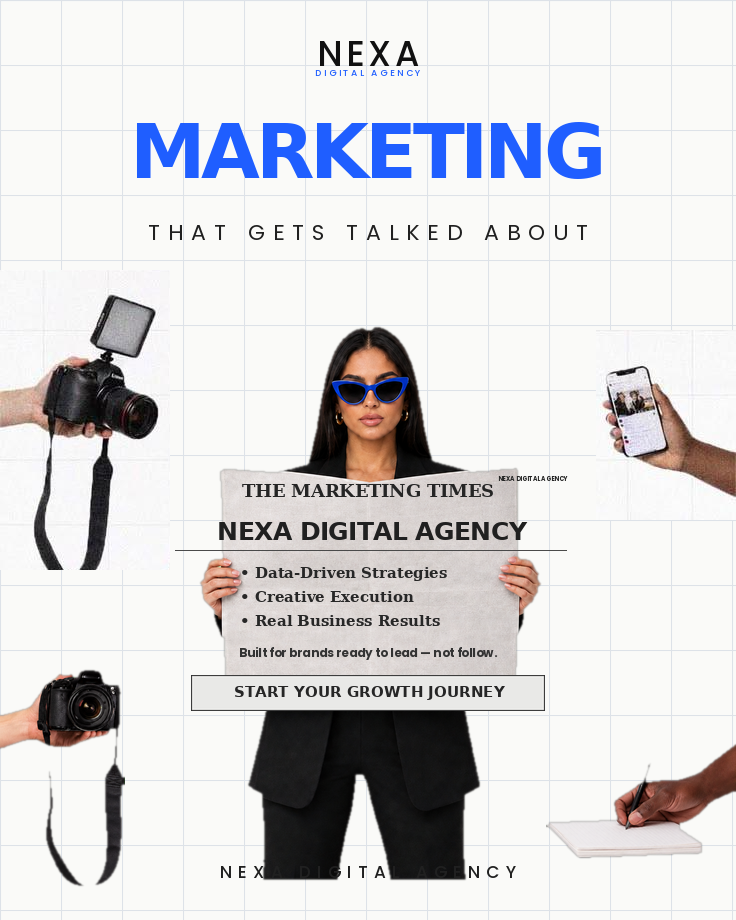
<style>
.page{position:relative;width:736px;height:920px;background:#fafaf8}
.page>*{position:absolute;margin:0}
.t1{font:35px "Poppins-Medium";letter-spacing:0.11em;color:#111111}
.t2{font:9px "Poppins-Medium";letter-spacing:0.28em;color:#1f5eff}
.t3{font:76px "DejaVuSans-Bold";letter-spacing:-0.055em;color:#1f5eff}
.t4{font:22px "Poppins-Regular";letter-spacing:0.36em;color:#202020}
.t5{font:18px "DejaVuSerif-Bold";letter-spacing:-0.015em;color:#252525}
.t6{font:6px "Poppins-Bold";letter-spacing:0.02em;color:#252525}
.t7{font:25px "DejaVuSans-Bold";letter-spacing:-0.025em;color:#202020}
.t8{font:15px "DejaVuSerif-Bold";color:#272727}
.t9{font:12px "Poppins-Bold";color:#333333}
.t10{font:15px "DejaVuSans-Bold";letter-spacing:0.005em;color:#262626}
.t11{font:17px "Poppins-Medium";letter-spacing:0.36em;color:#202020}
</style>
<div class="page">
<p class="t1" style="left:320px;top:41px;width:99px;height:25px">NEXA</p>
<p class="t2" style="left:315px;top:70px;width:105px;height:6px">DIGITAL AGENCY</p>
<p class="t3" style="left:136px;top:122px;width:465px;height:57px">MARKETING</p>
<p class="t4" style="left:149px;top:225px;width:438px;height:15px">THAT GETS TALKED ABOUT</p>
<p class="t5" style="left:242px;top:484px;width:251px;height:13px">THE MARKETING TIMES</p>
<p class="t6" style="left:498px;top:476px;width:70px;height:5px">NEXA DIGITAL AGENCY</p>
<p class="t7" style="left:219px;top:522px;width:309px;height:18px">NEXA DIGITAL AGENCY</p>
<p class="t8" style="left:242px;top:567px;width:205px;height:14px">• Data-Driven Strategies</p>
<p class="t8" style="left:242px;top:591px;width:172px;height:11px">• Creative Execution</p>
<p class="t8" style="left:242px;top:615px;width:198px;height:11px">• Real Business Results</p>
<p class="t9" style="left:240px;top:647px;width:258px;height:13px">Built for brands ready to lead — not follow.</p>
<p class="t10" style="left:235px;top:686px;width:270px;height:14px">START YOUR GROWTH JOURNEY</p>
<p class="t11" style="left:221px;top:866px;width:295px;height:12px">NEXA DIGITAL AGENCY</p>
</div>
